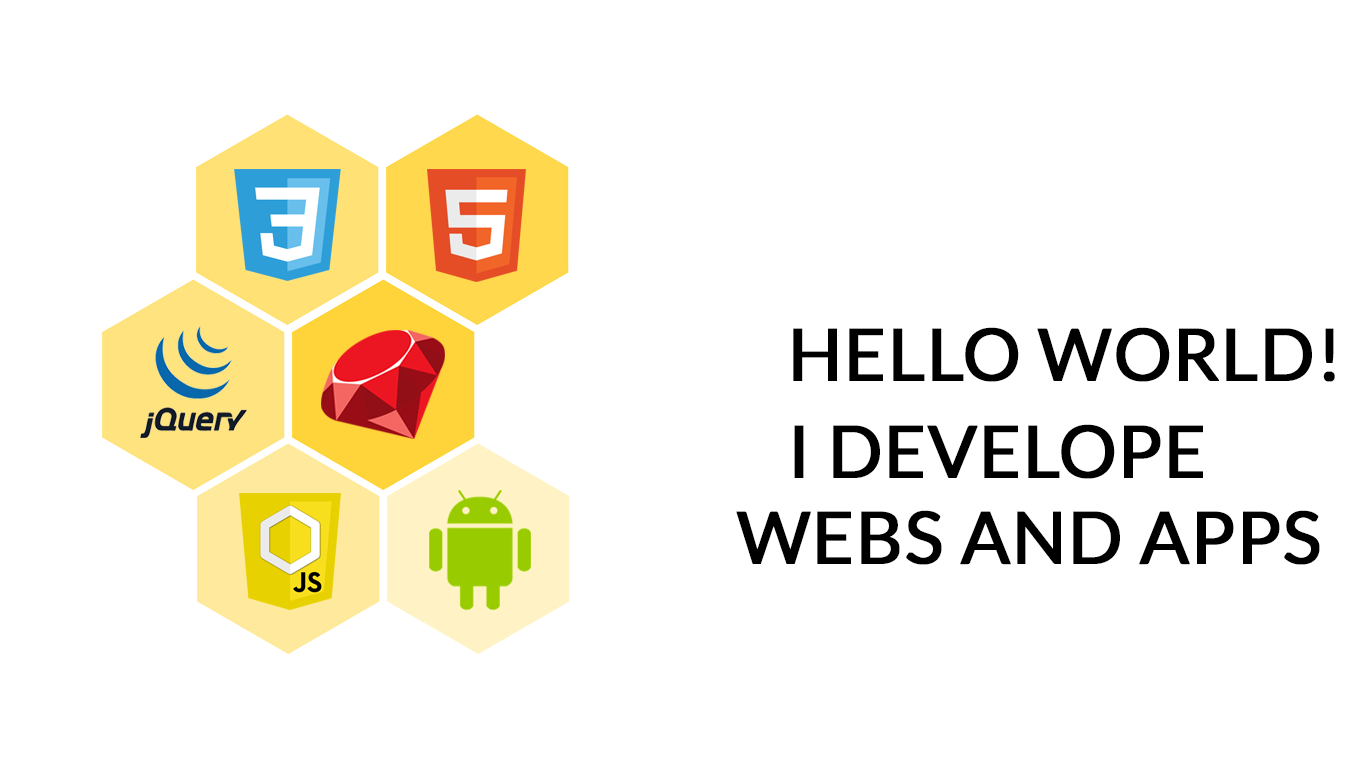
<style>
.page{position:relative;width:1366px;height:768px;background:#ffffff}
.page>*{position:absolute;margin:0}
.t1{font:72px "Lato-Regular";color:#000000;font-weight:bold}
</style>
<div class="page">
<p class="t1" style="left:793px;top:327px;width:542px;height:55px">HELLO WORLD!</p>
<p class="t1" style="left:736px;top:424px;width:584px;height:141px;text-align:center">I DEVELOPE <br>   WEBS AND APPS</p>
</div>
